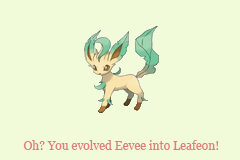
<style>
.page{position:relative;width:240px;height:160px;background:#f1fbd9}
.page>*{position:absolute;margin:0}
.t1{font:12px "Georgia";color:#dd817e}
</style>
<div class="page">
<p class="t1" style="left:23px;top:140px;width:196px;height:10px">Oh? You evolved Eevee into Leafeon!</p>
</div>
